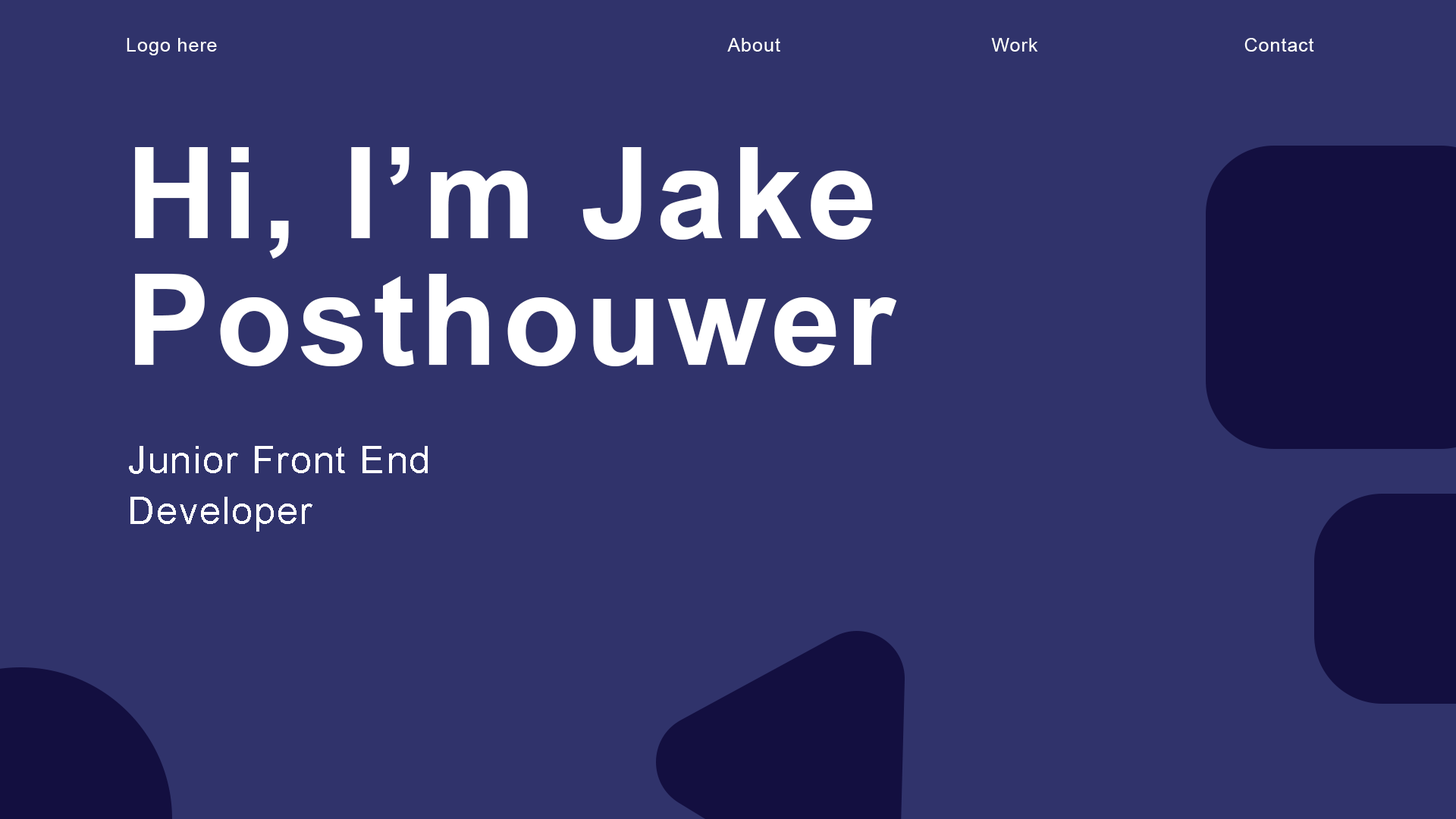
<style>
.page{position:relative;width:1456px;height:819px;background:#30336b}
.page>*{position:absolute;margin:0}
.t1{font:19px "ArialMT";letter-spacing:0.04em;color:#ffffff}
.t2{font:126.4px/126.4px "Arial-BoldMT";letter-spacing:0.04em;color:#ffffff}
.t3{font:37.9px/50.6px "ArialMT";letter-spacing:0.04em;color:#ffffff}
</style>
<div class="page">
<p class="t1" style="left:127px;top:38px;width:90px;height:17px">Logo here</p>
<p class="t1" style="left:727px;top:38px;width:53px;height:14px">About</p>
<p class="t1" style="left:991px;top:38px;width:47px;height:14px">Work</p>
<p class="t1" style="left:1244px;top:38px;width:70px;height:14px">Contact</p>
<p class="t2" style="left:135px;top:147px;width:762px;height:219px">Hi, I’m Jake<br>Posthouwer</p>
<p class="t3" style="left:129px;top:446px;width:299px;height:86px">Junior Front End <br>Developer</p>
</div>
